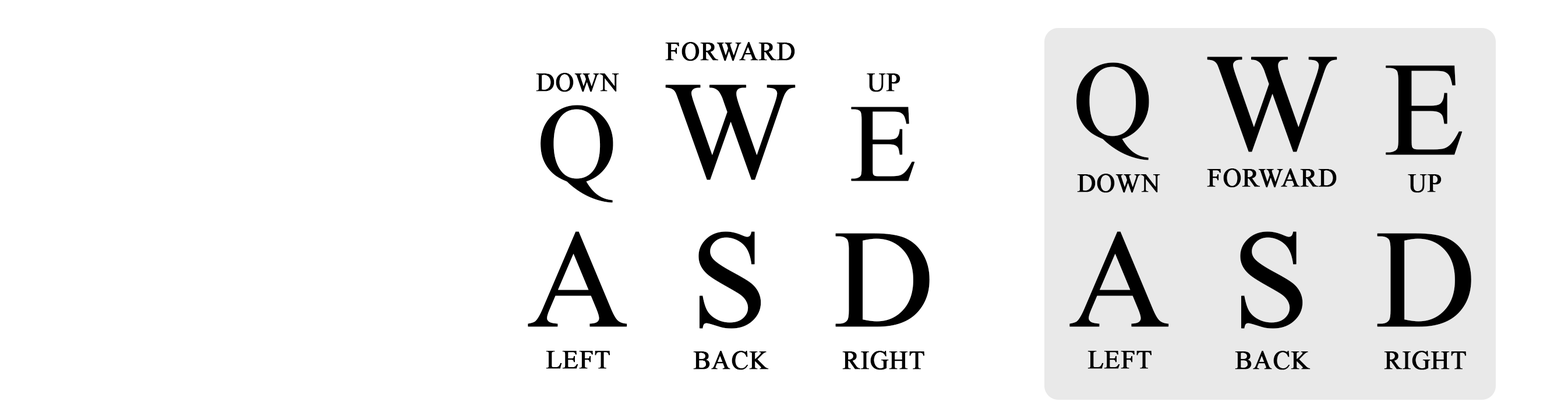
<style>
.page{position:relative;width:1568px;height:412px;background:#ffffff}
.page>*{position:absolute;margin:0}
.t1{font:25.6px "TimesNewRomanPSMT";letter-spacing:0.01em;color:#000000;font-weight:bold}
.t2{font:110.9px "TimesNewRomanPSMT";letter-spacing:0.01em;color:#000000;font-weight:bold}
.t3{font:139.8px "TimesNewRomanPSMT";letter-spacing:0.01em;color:#000000;font-weight:bold}
.t4{font:133.3px "TimesNewRomanPSMT";letter-spacing:0.01em;color:#000000;font-weight:bold}
</style>
<div class="page">
<p class="t1" style="left:665px;top:42px;width:130px;height:19px">FORWARD</p>
<p class="t2" style="left:1076px;top:62px;width:73px;height:98px">Q</p>
<p class="t3" style="left:1207px;top:56px;width:130px;height:96px">W</p>
<p class="t4" style="left:1386px;top:65px;width:77px;height:90px">E</p>
<p class="t1" style="left:536px;top:73px;width:83px;height:19px">DOWN</p>
<p class="t1" style="left:867px;top:73px;width:33px;height:19px">UP</p>
<p class="t3" style="left:665px;top:84px;width:131px;height:96px">W</p>
<p class="t2" style="left:541px;top:105px;width:72px;height:98px">Q</p>
<p class="t2" style="left:851px;top:107px;width:64px;height:74px">E</p>
<p class="t1" style="left:1077px;top:174px;width:83px;height:19px">DOWN</p>
<p class="t1" style="left:1207px;top:168px;width:130px;height:20px">FORWARD</p>
<p class="t1" style="left:1408px;top:174px;width:34px;height:19px">UP</p>
<p class="t3" style="left:528px;top:231px;width:99px;height:96px">A</p>
<p class="t3" style="left:698px;top:231px;width:63px;height:98px">S</p>
<p class="t3" style="left:835px;top:233px;width:95px;height:94px">D</p>
<p class="t3" style="left:1069px;top:231px;width:100px;height:96px">A</p>
<p class="t3" style="left:1240px;top:231px;width:63px;height:98px">S</p>
<p class="t3" style="left:1377px;top:233px;width:94px;height:94px">D</p>
<p class="t1" style="left:546px;top:351px;width:64px;height:18px">LEFT</p>
<p class="t1" style="left:693px;top:351px;width:76px;height:19px">BACK</p>
<p class="t1" style="left:842px;top:351px;width:82px;height:19px">RIGHT</p>
<p class="t1" style="left:1087px;top:351px;width:65px;height:18px">LEFT</p>
<p class="t1" style="left:1235px;top:351px;width:76px;height:19px">BACK</p>
<p class="t1" style="left:1384px;top:351px;width:82px;height:19px">RIGHT</p>
</div>
